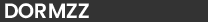
<style>
.page{position:relative;width:208px;height:22px;background:#333333}
.page>*{position:absolute;margin:0}
.t1{font:20.8px "Poppins-SemiBold";color:#ffffff;text-transform:uppercase}
</style>
<div class="page">
<p class="t1" style="left:5px;top:3px;width:84px;height:16px">Dormzz</p>
</div>
